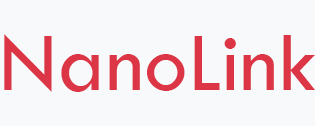
<style>
.page{position:relative;width:315px;height:126px;background:#f8f9fa}
.page>*{position:absolute;margin:0}
.t1{font:87.5px "TwCenMT-Regular";color:#dc3545}
</style>
<div class="page">
<p class="t1" style="left:4px;top:34px;width:312px;height:58px">NanoLink</p>
</div>
